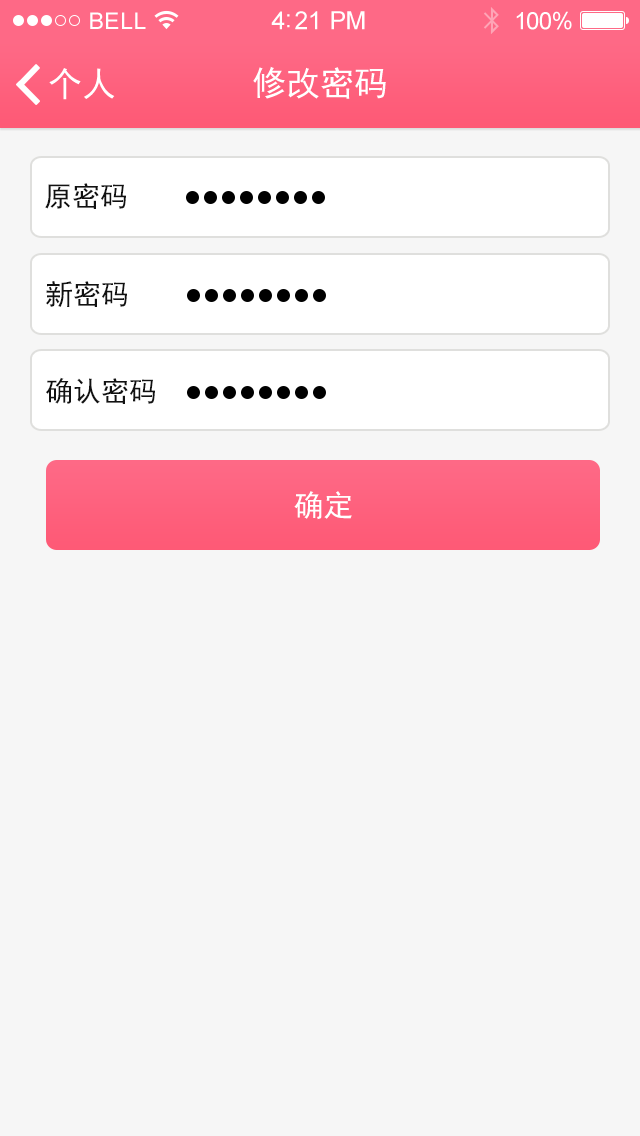
<style>
.page{position:relative;width:640px;height:1136px;background:#f6f6f6}
.page>*{position:absolute;margin:0}
.t1{font:28px "SimHei";color:#111111}
.t2{font:30px "SimHei";color:#ffffff}
</style>
<div class="page">
<p class="t1" style="left:45px;top:183px;width:81px;height:26px">原密码</p>
<p class="t1" style="left:46px;top:281px;width:81px;height:26px">新密码</p>
<p class="t1" style="left:46px;top:377px;width:109px;height:27px">确认密码</p>
<p class="t2" style="left:294px;top:491px;width:58px;height:29px">确定</p>
</div>
